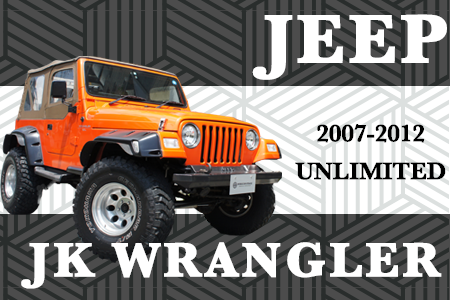
<style>
.page{position:relative;width:450px;height:300px;background:#4c4c4c}
.page>*{position:absolute;margin:0}
.t1{font:71px "Baskerville-Bold";letter-spacing:0.04em;color:#ffffff;font-weight:bold}
.t2{font:25px/38px "Baskerville-SemiBold";letter-spacing:-0.04em;color:#000000;font-weight:bold}
.t3{font:50px "Baskerville-Bold";letter-spacing:0.06em;color:#ffffff;font-weight:bold}
</style>
<div class="page">
<p class="t1" style="left:252px;top:14px;width:195px;height:66px">JEEP</p>
<p class="t2" style="left:295px;top:124px;width:151px;height:56px;text-align:center">2007-2012<br>UNLIMITED</p>
<p class="t3" style="left:21px;top:242px;width:421px;height:47px">JK WRANGLER</p>
</div>
